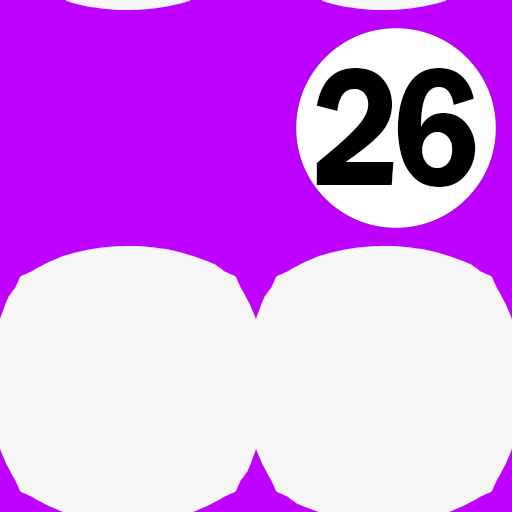
<style>
.page{position:relative;width:512px;height:512px;background:#f7f7f7}
.page>*{position:absolute;margin:0}
.t1{font:172.5px "FranklinGothic-Demi";letter-spacing:-0.05em;color:#010101;scale:0.87 1}
</style>
<div class="page">
<p class="t1" style="left:316px;top:68px;width:160px;height:119px">26</p>
</div>
